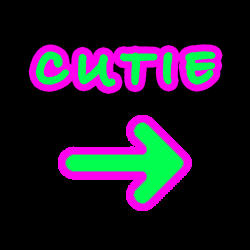
<style>
.page{position:relative;width:250px;height:250px;background:#000000}
.page>*{position:absolute;margin:0}
.t1{font:50px "BradleyHandITC";letter-spacing:0.2em;color:#00ff4f}
</style>
<div class="page">
<p class="t1" style="left:38px;top:54px;width:175px;height:30px">CUTIE</p>
</div>
